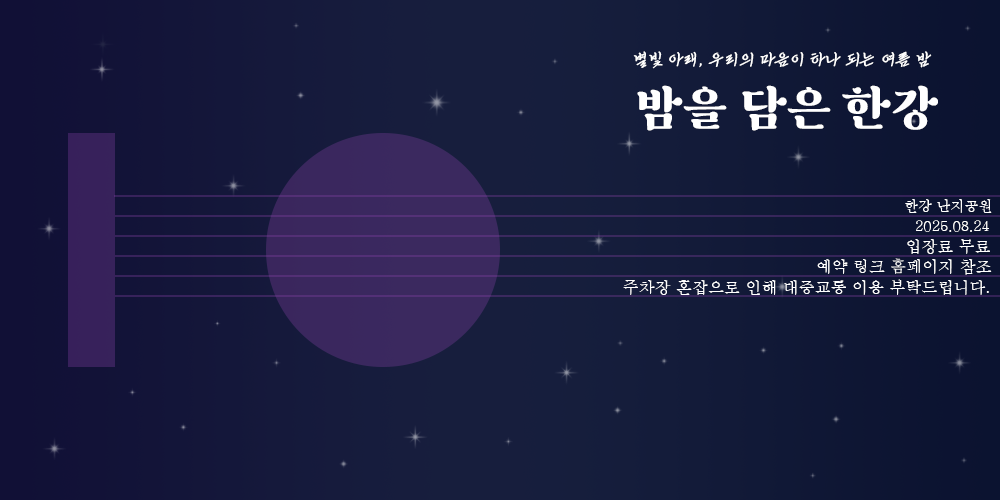
<style>
.page{position:relative;width:1000px;height:500px}
.page>*{position:absolute;margin:0}
.t1{font:16px "KCCAhnchangho";color:#ffffff}
.t2{font:48px "SF_HambakSnow";color:#ffffff}
.t3{font:14px "Batang";color:#ffffff}
.t4{font:16px "Batang";color:#ffffff}
</style>
<div class="page">
<p class="t1" style="left:633px;top:51px;width:299px;height:18px">별빛 아래, 우리의 마음이 하나 되는 여름 밤</p>
<p class="t2" style="left:637px;top:85px;width:301px;height:46px">밤을 담은 한강</p>
<p class="t3" style="left:905px;top:199px;width:87px;height:14px">한강 난지공원</p>
<p class="t3" style="left:916px;top:220px;width:73px;height:12px">2025.08.24</p>
<p class="t4" style="left:907px;top:239px;width:83px;height:15px">입장료 무료</p>
<p class="t4" style="left:817px;top:258px;width:175px;height:17px">예약 링크 홈페이지 참조</p>
<p class="t4" style="left:623px;top:279px;width:366px;height:16px">주차장 혼잡으로 인해 대중교통 이용 부탁드립니다.</p>
</div>
